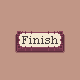
<style>
.page{position:relative;width:80px;height:80px;background:#c19686}
.page>*{position:absolute;margin:0}
.t1{font:16px "Pixolde";color:#483d3c}
</style>
<div class="page">
<p class="t1" style="left:22px;top:36px;width:36px;height:8px">Finish</p>
</div>
